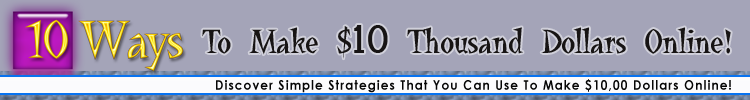
<style>
.page{position:relative;width:750px;height:100px;background:#a4a4b8}
.page>*{position:absolute;margin:0}
.t1{font:35px "LaBambaLetPlain";letter-spacing:-0.04em;color:#171414}
.t2{font:35px "Latha";letter-spacing:-0.04em;color:#171414}
.t3{font:13.4px "CenturyGothic-Bold";letter-spacing:0.09em;color:#060606;scale:0.9 1}
</style>
<div class="page">
<p class="t1" style="left:202px;top:25px;width:529px;height:34px">To Make $<span class="t2">10 </span>Thousand Dollars Online!</p>
<p class="t3" style="left:216px;top:79px;width:515px;height:14px">Discover Simple Strategies That You Can Use To Make $10,00 Dollars Online!</p>
</div>
